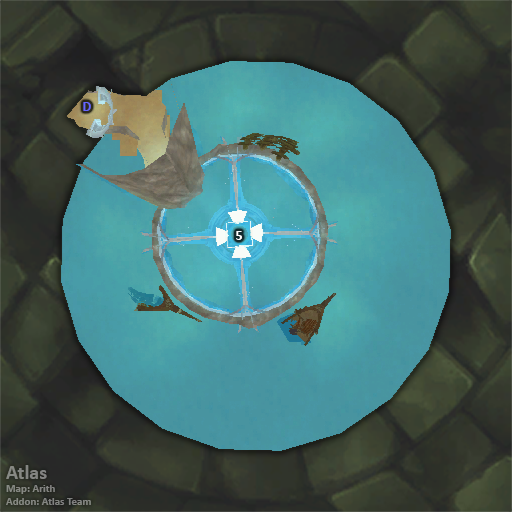
<style>
.page{position:relative;width:512px;height:512px}
.page>*{position:absolute;margin:0}
.t1{font:14px "Calibri-Bold";color:#6666ff}
.t2{font:14px "Calibri-Bold";color:#ffffff}
.t3{font:11px "Calibri-Bold";color:#848682}
.t4{font:20px "Calibri-Bold";color:#848682}
</style>
<div class="page">
<p class="t1" style="left:83px;top:102px;width:8px;height:9px">D</p>
<p class="t2" style="left:236px;top:231px;width:6px;height:9px">5</p>
<p class="t3" style="left:6px;top:465px;width:85px;height:40px"><span class="t4">Atlas<br></span>Map: Arith<br>Addon: Atlas Team</p>
</div>
